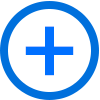
<style>
.page{position:relative;width:100px;height:100px;background:#ffffff}
.page>*{position:absolute;margin:0}
.t1{font:91.7px "MyriadPro-Bold";color:#0070ff}
</style>
<div class="page">
<p class="t1" style="left:25px;top:26px;width:49px;height:50px">+</p>
</div>
